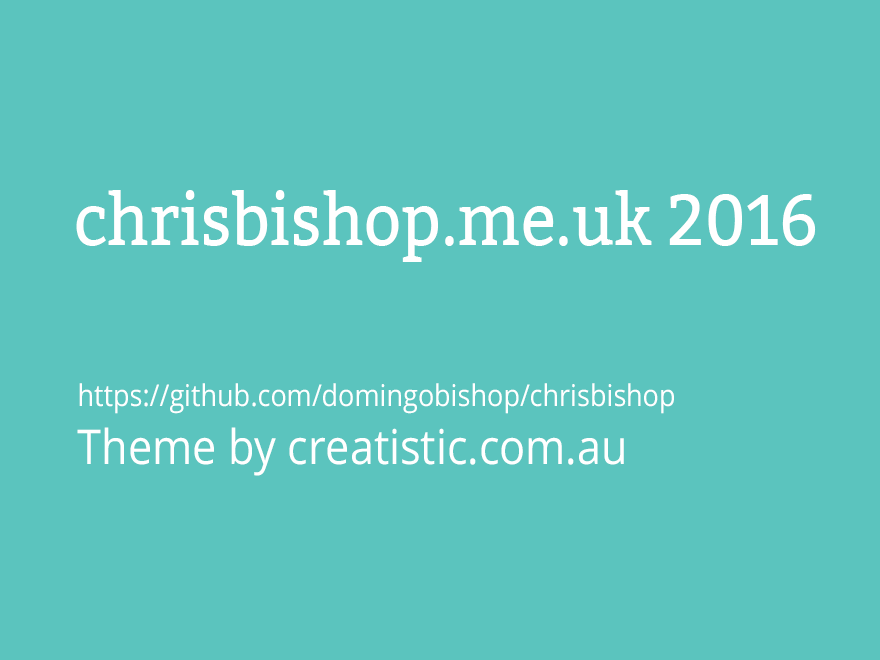
<style>
.page{position:relative;width:880px;height:660px;background:#5bc4be}
.page>*{position:absolute;margin:0}
.t1{font:72px "Bitter-Regular";color:#ffffff;scale:0.9 1}
.t2{font:30px "OpenSans";color:#ffffff;scale:0.9 1}
.t3{font:48px "OpenSans";color:#ffffff;scale:0.9 1}
</style>
<div class="page">
<p class="t1" style="left:76px;top:190px;width:740px;height:72px">chrisbishop.me.uk 2016</p>
<p class="t2" style="left:77px;top:383px;width:597px;height:93px">https://github.com/domingobishop/chrisbishop<br><span class="t3">Theme by creatistic.com.au</span></p>
</div>
